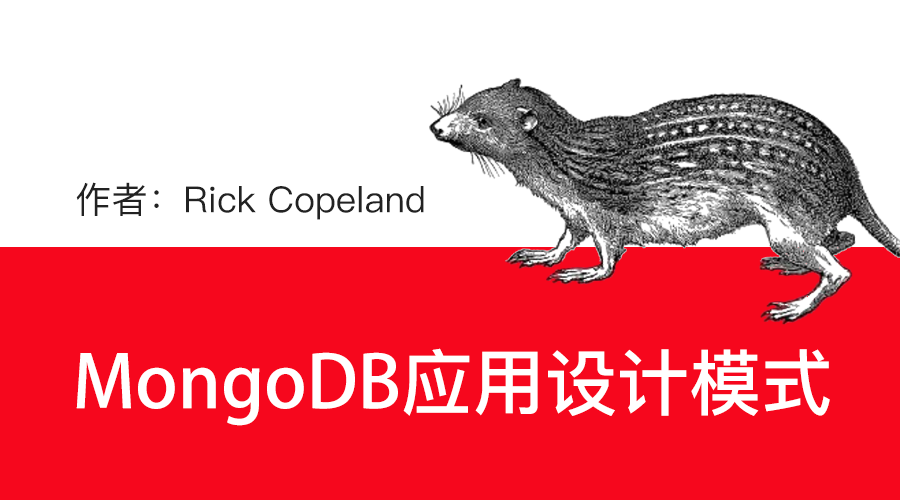
<style>
.page{position:relative;width:900px;height:500px;background:#f6071d}
.page>*{position:absolute;margin:0}
.t1{font:36px "PingFangSC-Regular";color:#222222}
.t2{font:72px "AdobeHeitiStd-Regular";color:#ffffff}
.t3{font:72px "PingFangSC-Medium";color:#ffffff}
</style>
<div class="page">
<p class="t1" style="left:76px;top:182px;width:348px;height:38px">作者：Rick Copeland</p>
<p class="t2" style="left:76px;top:348px;width:754px;height:78px">MongoDB<span class="t3">应用设计模式</span></p>
</div>
